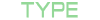
<style>
.page{position:relative;width:100px;height:20px;background:#ffffff}
.page>*{position:absolute;margin:0}
.t1{font:23px "MicrogrammaD-MediExte";letter-spacing:0.075em;color:#94d898;font-weight:bold;scale:0.7 1}
</style>
<div class="page">
<p class="t1" style="left:21px;top:2px;width:57px;height:16px">TYPE</p>
</div>
